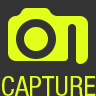
<style>
.page{position:relative;width:96px;height:96px;background:#333333}
.page>*{position:absolute;margin:0}
.t1{font:28px "HelveticaNeueLTStd-Cn";color:#e1ff1a;text-transform:uppercase}
</style>
<div class="page">
<p class="t1" style="left:2px;top:76px;width:94px;height:20px">CAPTURE</p>
</div>
